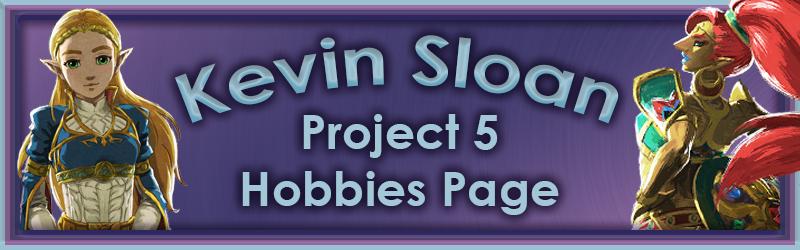
<style>
.page{position:relative;width:800px;height:250px}
.page>*{position:absolute;margin:0}
.t1{font:67.6px "CenturyGothic-Bold"}
.t2{font:47.5px "CenturyGothic-Bold";color:#a3c7d6}
</style>
<div class="page">
<p class="t1" style="left:175px;top:35px;width:444px;height:89px">Kevin Sloan</p>
<p class="t2" style="left:242px;top:114px;width:317px;height:101px;text-align:center">Project 5<br>Hobbies Page</p>
</div>
